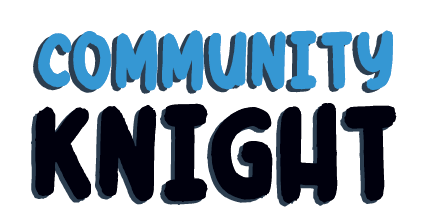
<style>
.page{position:relative;width:448px;height:224px;background:#ffffff}
.page>*{position:absolute;margin:0}
.t1{font:88.2px "HeaderMarker";color:#3597d3;text-transform:uppercase;scale:0.9 1}
.t2{font:147px "HeaderMarker";color:#00000d;text-transform:uppercase;scale:0.9 1}
</style>
<div class="page">
<p class="t1" style="left:38px;top:30px;width:355px;height:61px">COMMUNITY</p>
<p class="t1" style="left:38px;top:30px;width:355px;height:61px">COMMUNITY</p>
<p class="t2" style="left:35px;top:103px;width:362px;height:101px">KNIGHT</p>
<p class="t2" style="left:35px;top:103px;width:362px;height:101px">KNIGHT</p>
</div>
